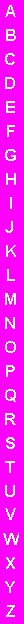
<style>
.page{position:relative;width:24px;height:624px;background:#ff00ff}
.page>*{position:absolute;margin:0}
.t1{font:16.7px "Arial-BoldMT";color:#ffffff}
</style>
<div class="page">
<p class="t1" style="left:5px;top:5px;width:11px;height:12px">A</p>
<p class="t1" style="left:6px;top:29px;width:10px;height:12px">B</p>
<p class="t1" style="left:5px;top:53px;width:10px;height:12px">C</p>
<p class="t1" style="left:5px;top:77px;width:10px;height:12px">D</p>
<p class="t1" style="left:6px;top:101px;width:9px;height:12px">E</p>
<p class="t1" style="left:7px;top:125px;width:8px;height:12px">F</p>
<p class="t1" style="left:5px;top:149px;width:11px;height:12px">G</p>
<p class="t1" style="left:6px;top:173px;width:10px;height:12px">H</p>
<p class="t1" style="left:5px;top:221px;width:8px;height:12px">J</p>
<p class="t1" style="left:6px;top:245px;width:10px;height:12px">K</p>
<p class="t1" style="left:7px;top:269px;width:8px;height:12px">L</p>
<p class="t1" style="left:5px;top:293px;width:11px;height:12px">M</p>
<p class="t1" style="left:5px;top:317px;width:10px;height:12px">N</p>
<p class="t1" style="left:5px;top:341px;width:11px;height:12px">O</p>
<p class="t1" style="left:6px;top:365px;width:9px;height:12px">P</p>
<p class="t1" style="left:5px;top:389px;width:11px;height:13px">Q</p>
<p class="t1" style="left:5px;top:413px;width:11px;height:12px">R</p>
<p class="t1" style="left:6px;top:437px;width:9px;height:12px">S</p>
<p class="t1" style="left:5px;top:461px;width:10px;height:12px">T</p>
<p class="t1" style="left:5px;top:485px;width:10px;height:12px">U</p>
<p class="t1" style="left:5px;top:508px;width:11px;height:12px">V</p>
<p class="t1" style="left:3px;top:533px;width:16px;height:12px">W</p>
<p class="t1" style="left:6px;top:557px;width:9px;height:12px">X</p>
<p class="t1" style="left:5px;top:581px;width:10px;height:12px">Y</p>
<p class="t1" style="left:6px;top:605px;width:9px;height:12px">Z</p>
</div>
